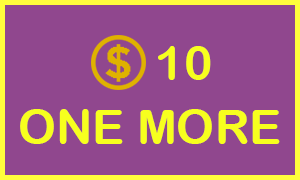
<style>
.page{position:relative;width:300px;height:180px;background:#90478e}
.page>*{position:absolute;margin:0}
.t1{font:48px "ArialRoundedMTBold";color:#f7ff1e}
</style>
<div class="page">
<p class="t1" style="left:158px;top:46px;width:53px;height:34px">10</p>
<p class="t1" style="left:20px;top:109px;width:260px;height:35px">ONE MORE</p>
</div>
